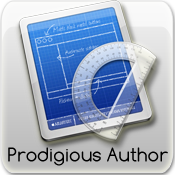
<style>
.page{position:relative;width:175px;height:175px}
.page>*{position:absolute;margin:0}
.t1{font:20px "Comfortaa";color:#000000}
</style>
<div class="page">
<p class="t1" style="left:8px;top:147px;width:160px;height:19px">Prodigious Author</p>
</div>
